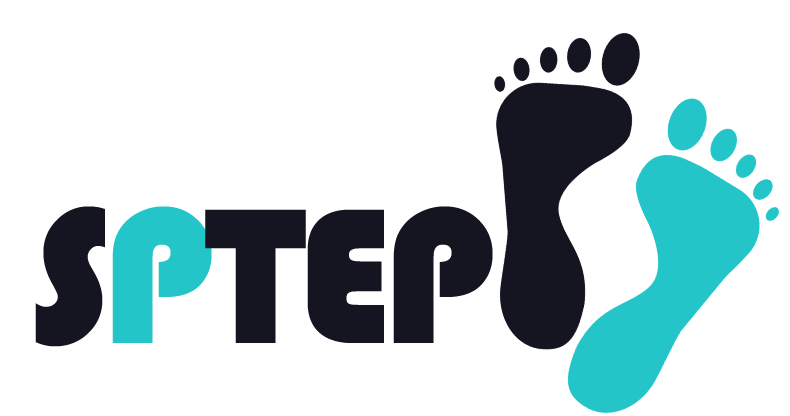
<style>
.page{position:relative;width:790px;height:416px;background:#ffffff}
.page>*{position:absolute;margin:0}
.t1{font:200px "Bauhaus93";letter-spacing:-0.05em;color:#141521;text-transform:uppercase}
.t2{font:200px "Bauhaus93";letter-spacing:-0.05em;color:#23c5c8;text-transform:uppercase}
</style>
<div class="page">
<p class="t1" style="left:35px;top:206px;width:458px;height:141px">s<span class="t2">p</span>tep</p>
</div>
